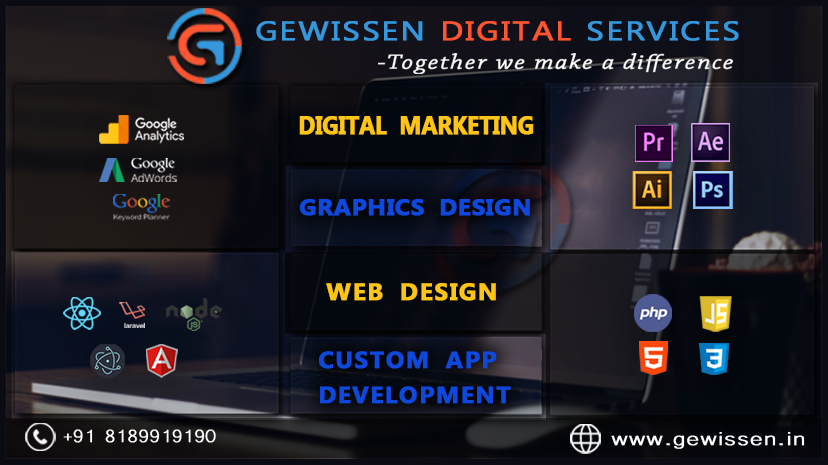
<style>
.page{position:relative;width:828px;height:465px}
.page>*{position:absolute;margin:0}
.t1{font:26.7px "MicrosoftPhagsPa";letter-spacing:0.05em;color:#3598dc;font-weight:bold;scale:1.21 1}
.t2{font:26.7px "MicrosoftPhagsPa";letter-spacing:0.05em;color:#ff5530;font-weight:bold;scale:1.21 1}
.t3{font:26.7px "MicrosoftPhagsPa";letter-spacing:0.05em;color:#000000;font-weight:bold;scale:1.21 1}
.t4{font:21.3px "ChaparralPro-LightIt";letter-spacing:0.05em;color:#ffffff;font-weight:bold;scale:1.24 1}
.t5{font:24.6px "MicrosoftTaiLe-Bold";letter-spacing:-0.04em;color:#ffc516;font-weight:bold;scale:0.95 1}
.t6{font:22.4px "MicrosoftTaiLe-Bold";color:#0e48dc;font-weight:bold;scale:1.09 1}
.t7{font:22.1px "MicrosoftTaiLe-Bold";color:#0e48dc;font-weight:bold;scale:1.1 1}
.t8{font:24px "MicrosoftTaiLe-Bold";letter-spacing:0.04em;color:#ffc516;font-weight:bold}
.t9{font:23.5px/34.3px "MicrosoftTaiLe-Bold";letter-spacing:0.04em;color:#0e48dc;font-weight:bold;scale:1.04 1}
.t10{font:22.9px "Microsoft-Yi-Baiti";letter-spacing:-0.08em;color:#ffffff;font-weight:bold;scale:1.06 1}
.t11{font:24.2px "Microsoft-Yi-Baiti";letter-spacing:0.02em;color:#ffffff;font-weight:bold;scale:1.24 1}
</style>
<div class="page">
<p class="t1" style="left:256px;top:21px;width:483px;height:20px">GEWISSEN              SERVICES</p>
<p class="t2" style="left:443px;top:21px;width:128px;height:20px"><span class="t3"> </span>DIGITAL</p>
<p class="t4" style="left:378px;top:53px;width:355px;height:21px">-Together we make a difference</p>
<p class="t5" style="left:299px;top:116px;width:235px;height:19px">DIGITAL MARKETING</p>
<p class="t6" style="left:299px;top:199px;width:231px;height:17px">GRAPHICS <span class="t7">DESIGN</span></p>
<p class="t8" style="left:326px;top:283px;width:170px;height:18px">WEB DESIGN</p>
<p class="t9" style="left:319px;top:351px;width:192px;height:53px">CUSTOM APP DEVELOPMENT</p>
<p class="t10" style="left:63px;top:429px;width:153px;height:14px">+91 8189919190</p>
<p class="t11" style="left:611px;top:431px;width:194px;height:18px">www.gewissen.in</p>
</div>
